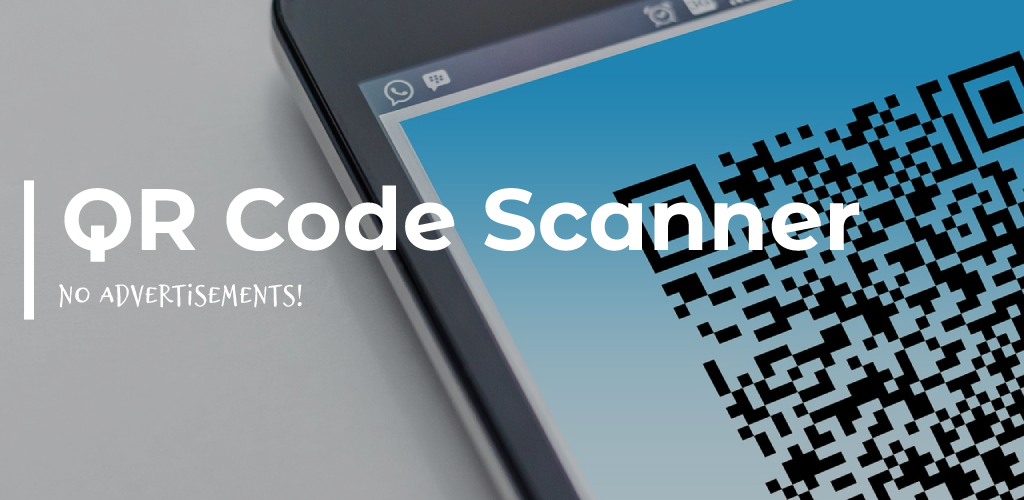
<style>
.page{position:relative;width:1024px;height:500px}
.page>*{position:absolute;margin:0}
.t1{font:87px "MontserratAlternates-Bold";color:#ffffff}
.t2{font:35px "Brizel";color:#ffffff}
</style>
<div class="page">
<p class="t1" style="left:64px;top:185px;width:796px;height:77px">QR Code Scanner</p>
<p class="t2" style="left:59px;top:283px;width:243px;height:25px">No ADVERTISEMENTS!</p>
</div>
